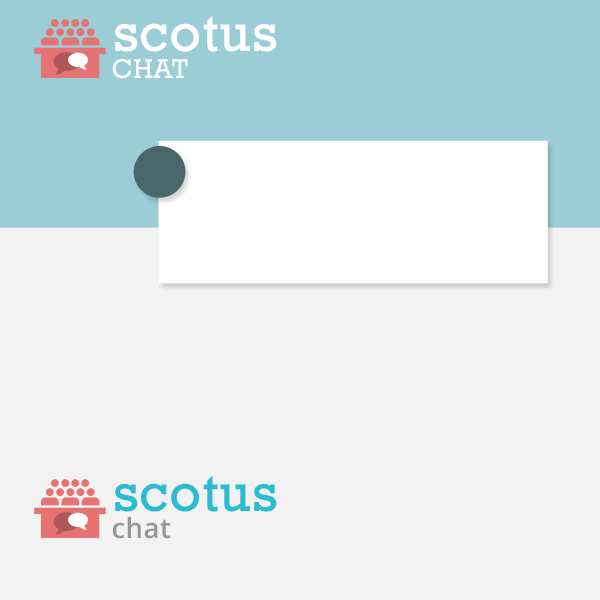
<style>
.page{position:relative;width:600px;height:600px;background:#f2f2f2}
.page>*{position:absolute;margin:0}
.t1{font:56.3px "Rockwell";letter-spacing:0.01em;color:#ffffff}
.t2{font:27.7px "Rockwell";letter-spacing:0.01em;color:#ffffff;text-transform:uppercase}
.t3{font:56.3px "Rockwell";letter-spacing:0.01em;color:#2dbbd4}
.t4{font:27.7px "OpenSans-Semibold";letter-spacing:0.01em;color:#939798}
</style>
<div class="page">
<p class="t1" style="left:115px;top:15px;width:162px;height:37px">scotus</p>
<p class="t2" style="left:112px;top:59px;width:76px;height:20px">chat</p>
<p class="t3" style="left:115px;top:475px;width:162px;height:37px">scotus</p>
<p class="t4" style="left:113px;top:517px;width:58px;height:22px">chat</p>
</div>
